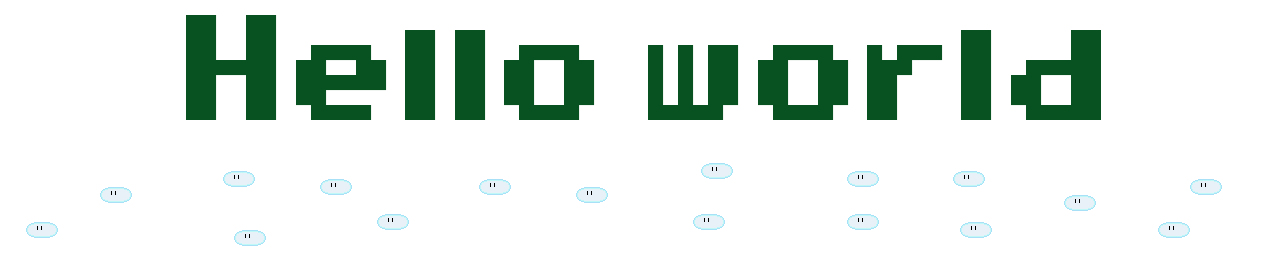
<style>
.page{position:relative;width:1287px;height:258px;background:#ffffff}
.page>*{position:absolute;margin:0}
.t1{font:120px "Super-Mario-World";color:#075220}
</style>
<div class="page">
<p class="t1" style="left:186px;top:15px;width:915px;height:105px">Hello world</p>
</div>
